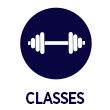
<style>
.page{position:relative;width:110px;height:110px;background:#ffffff}
.page>*{position:absolute;margin:0}
.t1{font:16.3px "GothamNarrow-Bold";letter-spacing:-0.05em;color:#080540;text-transform:uppercase}
</style>
<div class="page">
<p class="t1" style="left:26px;top:92px;width:59px;height:12px">CLASSES</p>
</div>
